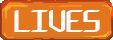
<style>
.page{position:relative;width:113px;height:40px;background:#e3761c}
.page>*{position:absolute;margin:0}
.t1{font:30px "ChemicalReactionABRK";color:#ffffff}
</style>
<div class="page">
<p class="t1" style="left:14px;top:10px;width:86px;height:22px">LIVES</p>
</div>
